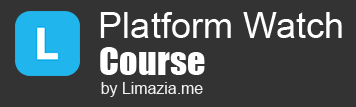
<style>
.page{position:relative;width:356px;height:107px;background:#333333}
.page>*{position:absolute;margin:0}
.t1{font:36.1px "ArialMT";color:#ffffff}
.t2{font:36.1px "Impact";color:#ffffff}
.t3{font:15.9px "ArialMT";color:#f0f0f0}
</style>
<div class="page">
<p class="t1" style="left:100px;top:12px;width:242px;height:26px">Platform Watch</p>
<p class="t2" style="left:100px;top:47px;width:105px;height:28px">Course</p>
<p class="t3" style="left:101px;top:82px;width:102px;height:15px">by Limazia.me</p>
</div>
